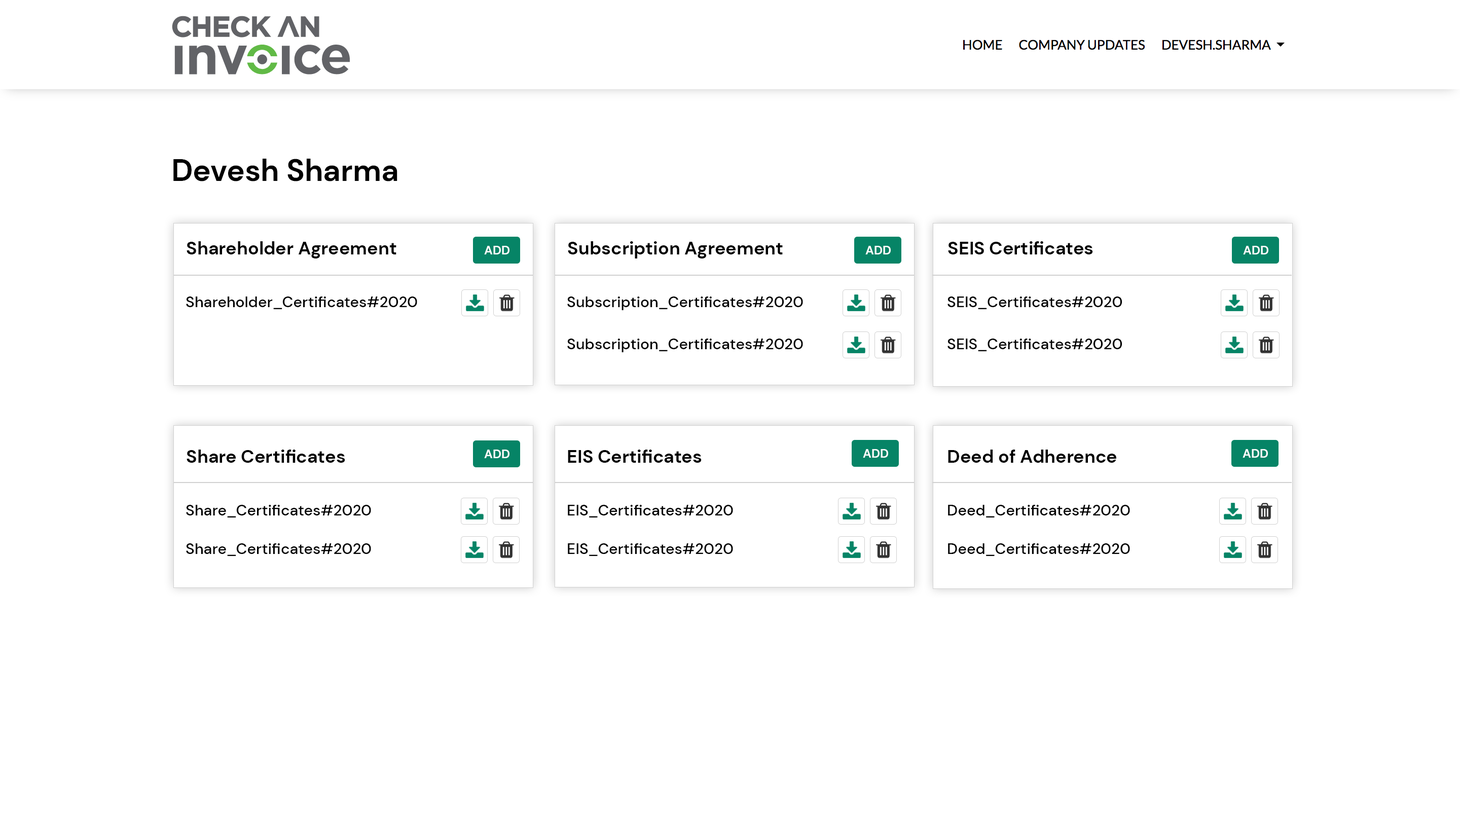
<style>
.page{position:relative;width:1460px;height:816px;background:#ffffff}
.page>*{position:absolute;margin:0}
.t1{font:30.4px "DMSans-Bold";color:#000000}
.t2{font:18.3px "DMSans-Bold";color:#000000}
.t3{font:12.2px "DMSans-Bold";color:#ffffff;text-transform:uppercase}
.t4{font:15.2px "DMSans-Medium";color:#000000}
</style>
<div class="page">
<p class="t1" style="left:173px;top:159px;width:225px;height:23px">Devesh Sharma</p>
<p class="t2" style="left:187px;top:241px;width:210px;height:18px">Shareholder Agreement</p>
<p class="t3" style="left:484px;top:246px;width:26px;height:9px">Add</p>
<p class="t2" style="left:568px;top:241px;width:215px;height:18px">Subscription Agreement</p>
<p class="t3" style="left:866px;top:246px;width:25px;height:9px">Add</p>
<p class="t2" style="left:948px;top:241px;width:145px;height:14px">SEIS Certificates</p>
<p class="t3" style="left:1243px;top:246px;width:26px;height:9px">Add</p>
<p class="t4" style="left:186px;top:297px;width:231px;height:12px">Shareholder_Certificates#2020</p>
<p class="t4" style="left:567px;top:297px;width:236px;height:13px">Subscription_Certificates#2020</p>
<p class="t4" style="left:948px;top:297px;width:175px;height:12px">SEIS_Certificates#2020</p>
<p class="t4" style="left:567px;top:339px;width:236px;height:13px">Subscription_Certificates#2020</p>
<p class="t4" style="left:948px;top:339px;width:175px;height:12px">SEIS_Certificates#2020</p>
<p class="t2" style="left:187px;top:450px;width:158px;height:13px">Share Certificates</p>
<p class="t3" style="left:484px;top:450px;width:26px;height:8px">Add</p>
<p class="t2" style="left:568px;top:450px;width:134px;height:13px">EIS Certificates</p>
<p class="t3" style="left:863px;top:449px;width:25px;height:9px">Add</p>
<p class="t2" style="left:948px;top:450px;width:169px;height:13px">Deed of Adherence</p>
<p class="t3" style="left:1243px;top:449px;width:25px;height:9px">Add</p>
<p class="t4" style="left:186px;top:505px;width:185px;height:13px">Share_Certificates#2020</p>
<p class="t4" style="left:568px;top:505px;width:165px;height:13px">EIS_Certificates#2020</p>
<p class="t4" style="left:948px;top:505px;width:182px;height:13px">Deed_Certificates#2020</p>
<p class="t4" style="left:186px;top:544px;width:185px;height:12px">Share_Certificates#2020</p>
<p class="t4" style="left:568px;top:544px;width:165px;height:12px">EIS_Certificates#2020</p>
<p class="t4" style="left:948px;top:544px;width:182px;height:12px">Deed_Certificates#2020</p>
</div>
